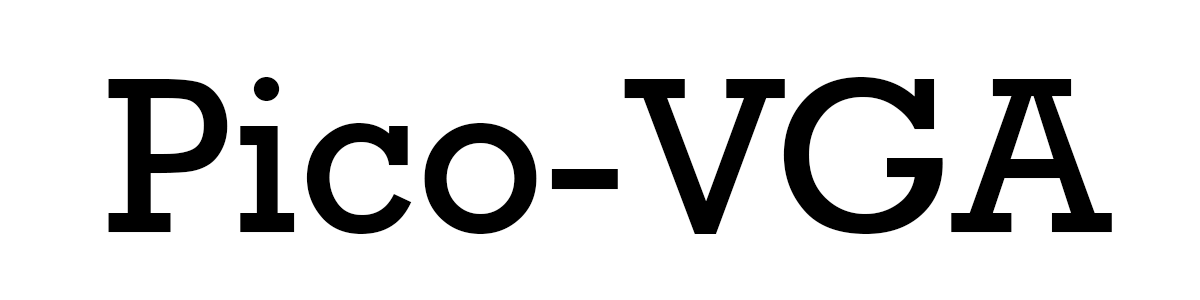
<style>
.page{position:relative;width:1200px;height:300px;background:#ffffff}
.page>*{position:absolute;margin:0}
.t1{font:225px "Rockwell";color:#000000}
</style>
<div class="page">
<p class="t1" style="left:108px;top:77px;width:1004px;height:157px">Pico-VGA</p>
</div>
